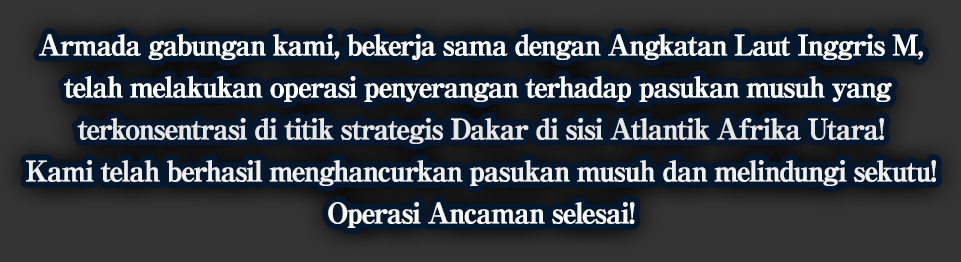
<style>
.page{position:relative;width:961px;height:262px;background:#03172f}
.page>*{position:absolute;margin:0}
.t1{font:28px/42px "RyuminPro-ExBold";letter-spacing:-0.08em;color:#ffffff;font-weight:bold}
</style>
<div class="page">
<p class="t1" style="left:26px;top:34px;width:910px;height:194px;text-align:center">Armada gabungan kami, bekerja sama dengan Angkatan Laut Inggris M,<br>telah melakukan operasi penyerangan terhadap pasukan musuh yang <br>terkonsentrasi di titik strategis Dakar di sisi Atlantik Afrika Utara!<br>Kami telah berhasil menghancurkan pasukan musuh dan melindungi sekutu!<br>Operasi Ancaman selesai!</p>
</div>
